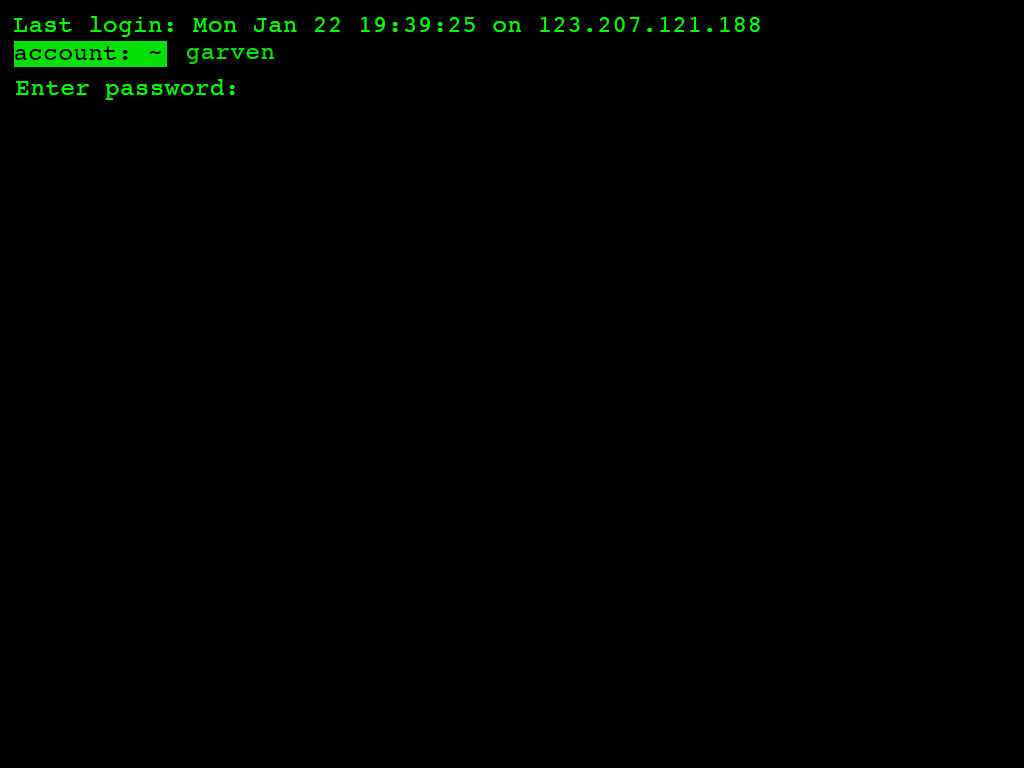
<style>
.page{position:relative;width:1024px;height:768px;background:#000000}
.page>*{position:absolute;margin:0}
.t1{font:24px "Courier";letter-spacing:0.024em;color:#00ff00}
.t2{font:24px "Courier";letter-spacing:0.024em;color:#000000}
.t3{font:24px "Courier";letter-spacing:0.024em;color:#04df04}
</style>
<div class="page">
<p class="t1" style="left:14px;top:16px;width:746px;height:21px">Last login: Mon Jan 22 19:39:25 on 123.207.121.188</p>
<p class="t2" style="left:15px;top:46px;width:146px;height:14px">account: ~</p>
<p class="t3" style="left:187px;top:48px;width:87px;height:16px">garven</p>
<p class="t1" style="left:16px;top:79px;width:219px;height:21px">Enter password:</p>
</div>
